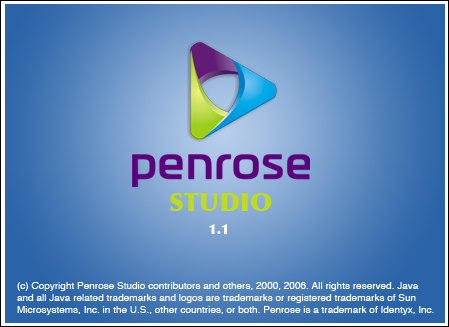
<style>
.page{position:relative;width:449px;height:327px}
.page>*{position:absolute;margin:0}
.t1{font:25.5px "Optima-ExtraBlack";color:#bfdb1e}
.t2{font:14px "Optima-ExtraBlack";color:#ffffff}
.t3{font:10px "Helvetica";color:#ffffff}
</style>
<div class="page">
<p class="t1" style="left:170px;top:193px;width:102px;height:18px">STUDIO</p>
<p class="t2" style="left:209px;top:224px;width:19px;height:10px">1.1</p>
<p class="t3" style="left:17px;top:282px;width:417px;height:33px">(c) Copyright Penrose Studio contributors and others, 2000, 2006. All rights reserved. Java <br>and all Java related trademarks and logos are trademarks or registered trademarks of Sun <br>Microsystems, Inc. in the U.S., other countries, or both. Penrose is a trademark of Identyx, Inc.</p>
</div>
